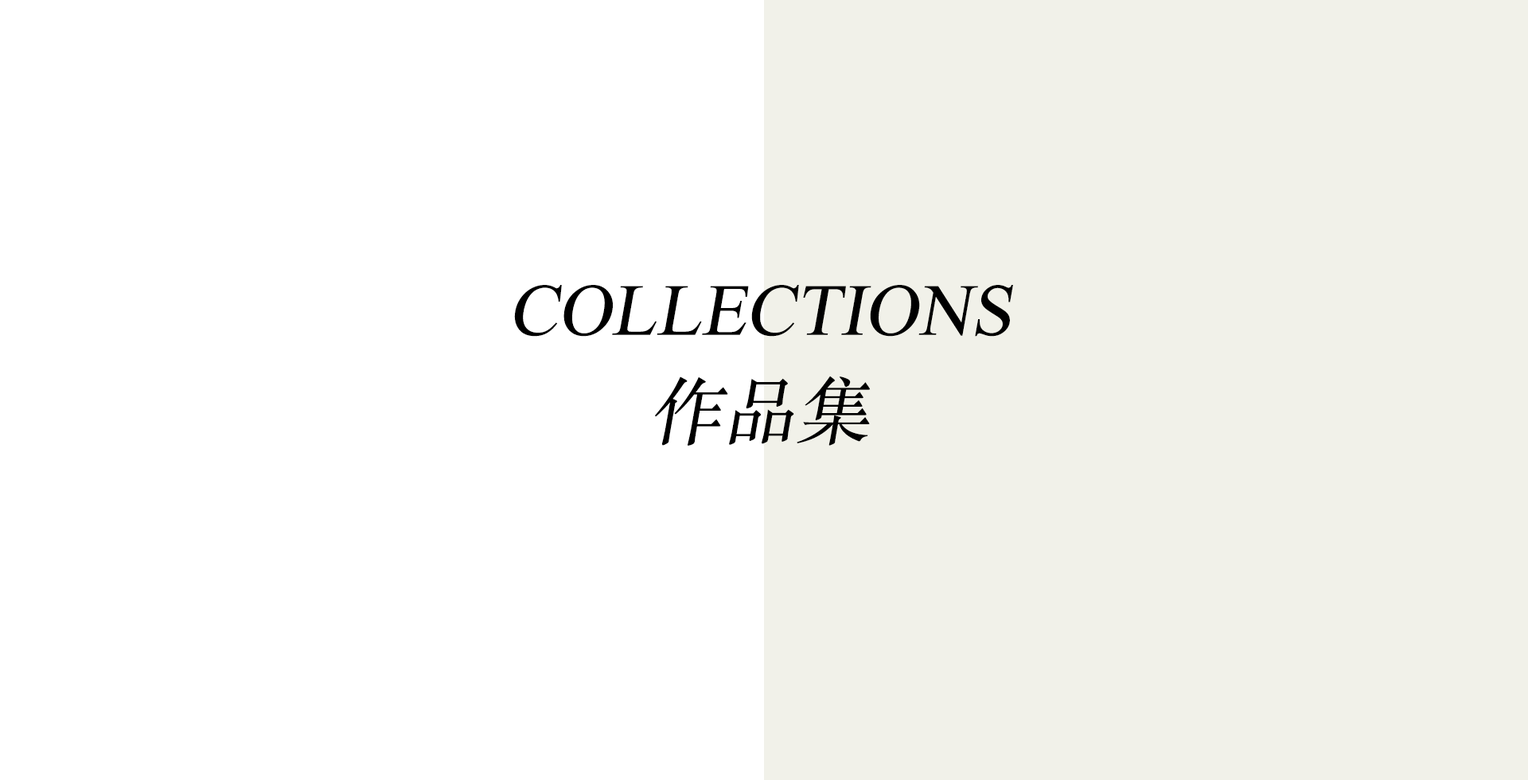
<style>
.page{position:relative;width:1528px;height:780px;background:#ffffff}
.page>*{position:absolute;margin:0}
.t1{font:73.6px "TimesNewRomanPSMT";color:#000000;font-style:italic}
.t2{font:73.6px "STSongti-SC-Regular";color:#000000;font-style:italic}
</style>
<div class="page">
<p class="t1" style="left:514px;top:285px;width:499px;height:161px;text-align:center">COLLECTIONS<br><span class="t2">作品集</span></p>
</div>
